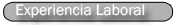
<style>
.page{position:relative;width:179px;height:25px}
.page>*{position:absolute;margin:0}
.t1{font:15.7px "FranklinGothic-Book";color:#ffffff}
</style>
<div class="page">
<p class="t1" style="left:16px;top:4px;width:129px;height:14px">Experiencia Laboral</p>
</div>
